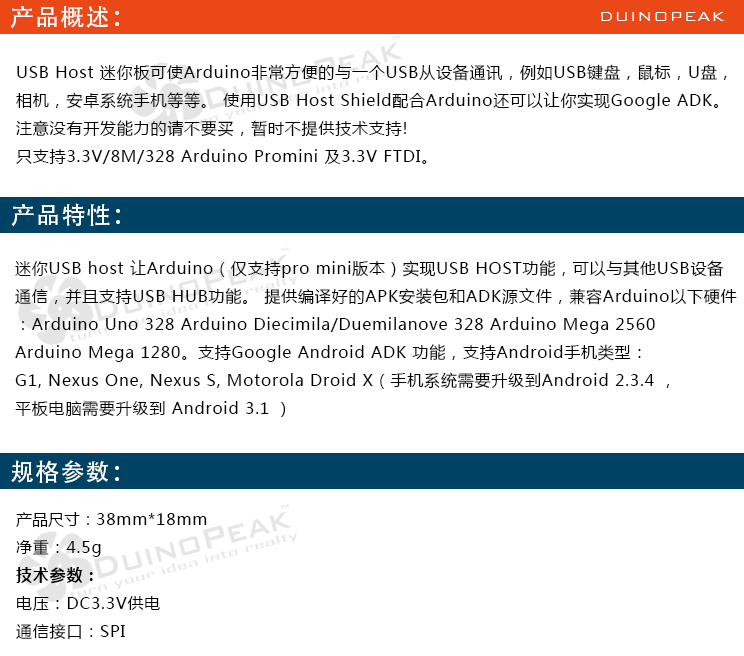
<style>
.page{position:relative;width:744px;height:656px;background:#ffffff}
.page>*{position:absolute;margin:0}
.t1{font:24px "AdobeHeitiStd-Regular";letter-spacing:0.05em;color:#ffffff}
.t2{font:18px "BankGothicBT-Light";letter-spacing:0.05em;color:#ffffff}
.t3{font:16px "MicrosoftYaHei";letter-spacing:0.05em;color:#000000}
.t4{font:16px "MicrosoftYaHei";color:#000000}
.t5{font:16px "MicrosoftYaHei-Bold";letter-spacing:0.05em;color:#000000}
</style>
<div class="page">
<p class="t1" style="left:10px;top:6px;width:109px;height:23px">产品概述：</p>
<p class="t2" style="left:601px;top:12px;width:124px;height:9px">DUINOPEAK</p>
<p class="t3" style="left:16px;top:64px;width:711px;height:100px">USB Host 迷你板可使Arduino非常方便的与一个USB从设备通讯，例如USB键盘，鼠标，U盘，<br>相机，安卓系统手机等等。 使用USB Host Shield配合Arduino还可以让你实现Google ADK。<br>注意没有开发能力的请不要买，暂时不提供技术支持!<br>只支持3.3V/8M/328 Arduino Promini 及3.3V FTDI。</p>
<p class="t1" style="left:11px;top:203px;width:109px;height:24px">产品特性：</p>
<p class="t3" style="left:15px;top:260px;width:722px;height:157px">迷你USB host 让Arduino（仅支持pro mini版本）实现USB HOST功能，可以与其他USB设备<br>通信，并且支持USB HUB功能。 提供编译好的APK安装包和ADK源文件，兼容Arduino以下硬件<br>：Arduino Uno 328 Arduino Diecimila/Duemilanove 328 Arduino Mega 2560 <br>Arduino Mega 1280。支持Google Android ADK 功能，支持Android手机类型：<br>G1, Nexus One, Nexus S, Motorola Droid X（手机系统需要升级到Android 2.3.4 ，<br>平板电脑需要升级到 Android 3.1 ）</p>
<p class="t1" style="left:11px;top:460px;width:108px;height:23px">规格参数：</p>
<p class="t3" style="left:16px;top:512px;width:191px;height:127px"><span class="t4">产品尺寸：</span>38mm*18mm<br>净重：4.5g<br><span class="t5">技术参数：<br></span>电压：DC3.3V供电<br>通信接口：SPI</p>
</div>
